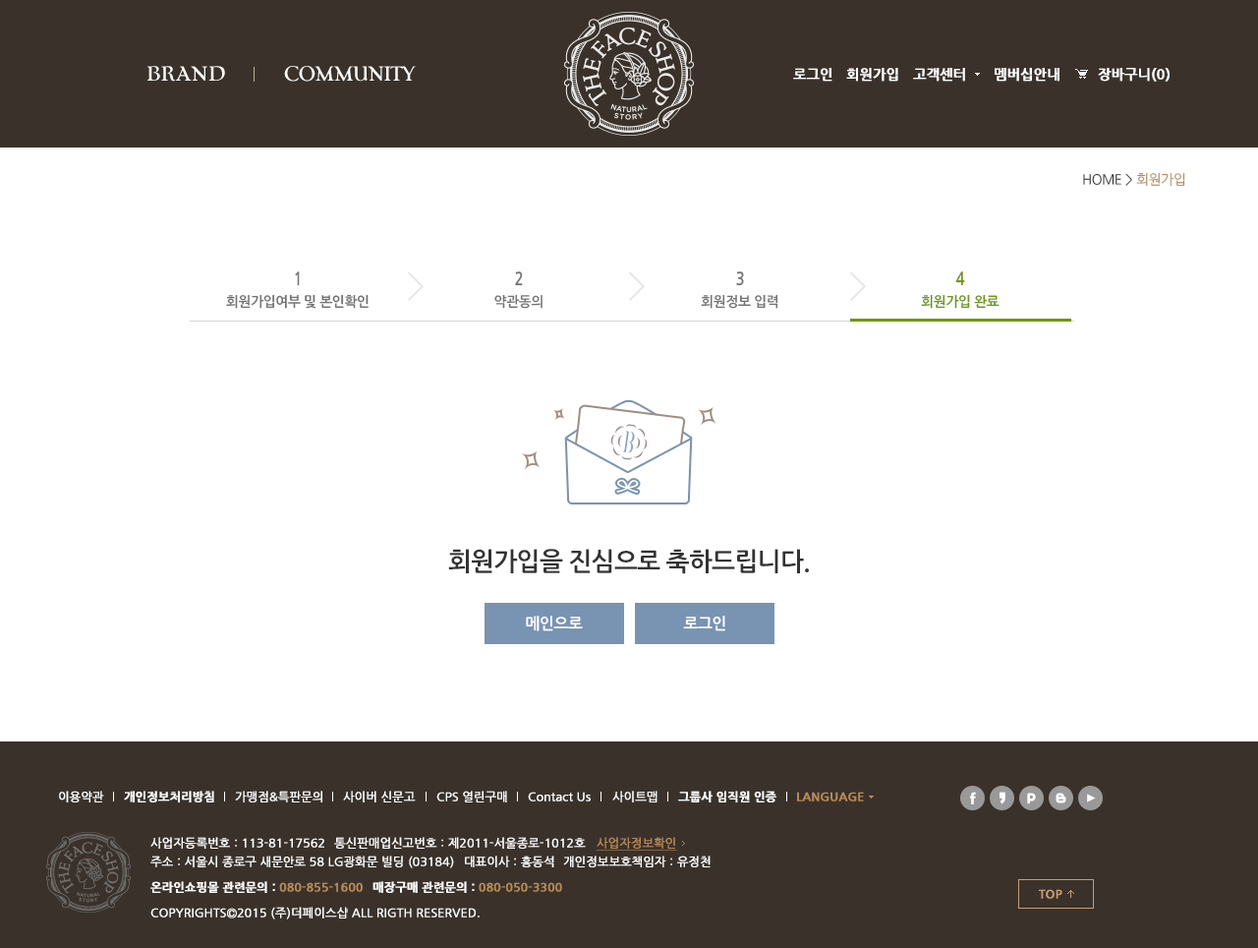
<style>
.page{position:relative;width:1258px;height:948px;background:#ffffff}
.page>*{position:absolute;margin:0}
.t1{font:13.8px "NanumGothicBold";color:#ffffff;font-weight:bold}
.t2{font:13.8px "NanumGothic";letter-spacing:-0.03em;color:#333333}
.t3{font:13.8px "NanumGothic";letter-spacing:-0.03em;color:#b68957}
.t4{font:17.7px "NanumGothicBold";letter-spacing:-0.03em;color:#737373;scale:0.85 1}
.t5{font:17.7px "NanumGothicBold";letter-spacing:-0.03em;color:#6d9811;scale:0.85 1}
.t6{font:13.8px "NanumGothicBold";letter-spacing:-0.03em;color:#737373}
.t7{font:13.8px "NanumGothicBold";letter-spacing:-0.03em;color:#6d9811}
.t8{font:25.6px "NanumGothicBold";letter-spacing:-0.03em;color:#333333}
.t9{font:15.7px "NanumGothicBold";letter-spacing:-0.03em;color:#ffffff}
.t10{font:11.8px "NanumGothic";color:#ffffff;font-weight:bold}
.t11{font:11.8px "NanumGothicBold";color:#ffffff;font-weight:bold}
.t12{font:11.8px "NanumGothicBold";color:#b68957;font-weight:bold}
.t13{font:11.8px "NanumGothic";color:#b68957;font-weight:bold;text-decoration:underline}
</style>
<div class="page">
<p class="t1" style="left:793px;top:68px;width:40px;height:14px">로그인</p>
<p class="t1" style="left:846px;top:68px;width:53px;height:14px">회원가입</p>
<p class="t1" style="left:913px;top:68px;width:52px;height:14px">고객센터</p>
<p class="t1" style="left:995px;top:68px;width:65px;height:14px">멤버십안내</p>
<p class="t1" style="left:1098px;top:68px;width:72px;height:14px">장바구니(0)</p>
<p class="t2" style="left:1083px;top:172px;width:103px;height:15px">HOME &gt; <span class="t3">회원가입</span></p>
<p class="t4" style="left:295px;top:271px;width:5px;height:15px">1</p>
<p class="t4" style="left:515px;top:271px;width:8px;height:15px">2</p>
<p class="t4" style="left:736px;top:271px;width:8px;height:15px">3</p>
<p class="t5" style="left:956px;top:271px;width:9px;height:15px">4</p>
<p class="t6" style="left:226px;top:294px;width:143px;height:15px">회원가입여부 및 본인확인</p>
<p class="t6" style="left:494px;top:294px;width:49px;height:15px">약관동의</p>
<p class="t6" style="left:701px;top:294px;width:78px;height:15px">회원정보 입력</p>
<p class="t7" style="left:921px;top:294px;width:79px;height:15px">회원가입 완료</p>
<p class="t8" style="left:448px;top:549px;width:361px;height:25px">회원가입을 진심으로 축하드립니다.</p>
<p class="t9" style="left:526px;top:615px;width:57px;height:16px">메인으로</p>
<p class="t9" style="left:683px;top:615px;width:42px;height:16px">로그인</p>
<p class="t10" style="left:59px;top:790px;width:45px;height:12px">이용약관</p>
<p class="t11" style="left:124px;top:790px;width:90px;height:12px">개인정보처리방침</p>
<p class="t10" style="left:235px;top:790px;width:87px;height:12px">가맹점&amp;특판문의</p>
<p class="t10" style="left:343px;top:790px;width:73px;height:12px">사이버 신문고</p>
<p class="t10" style="left:436px;top:790px;width:71px;height:12px">CPS 열린구매</p>
<p class="t10" style="left:528px;top:791px;width:63px;height:10px">Contact Us</p>
<p class="t10" style="left:612px;top:790px;width:46px;height:12px">사이트맵</p>
<p class="t11" style="left:678px;top:790px;width:99px;height:12px">그룹사 임직원 인증</p>
<p class="t12" style="left:797px;top:791px;width:67px;height:10px">LANGUAGE</p>
<p class="t10" style="left:150px;top:837px;width:174px;height:11px">사업자등록번호 : 113-81-17562</p>
<p class="t10" style="left:334px;top:837px;width:252px;height:11px">통신판매업신고번호 : 제2011-서울종로-1012호</p>
<p class="t13" style="left:597px;top:837px;width:80px;height:13px">사업자정보확인</p>
<p class="t10" style="left:150px;top:855px;width:304px;height:13px">주소 : 서울시 종로구 새문안로 58 LG광화문 빌딩 (03184)</p>
<p class="t10" style="left:465px;top:855px;width:89px;height:12px">대표이사 : 홍동석</p>
<p class="t10" style="left:563px;top:855px;width:148px;height:12px">개인정보보호책임자 : 유정천</p>
<p class="t11" style="left:150px;top:881px;width:213px;height:12px">온라인쇼핑몰 관련문의 : <span class="t12">080-855-1600</span></p>
<p class="t12" style="left:373px;top:881px;width:189px;height:12px"><span class="t11">매장구매 관련문의 : </span>080-050-3300</p>
<p class="t10" style="left:150px;top:906px;width:330px;height:13px">COPYRIGHTS©2015 (주)더페이스샵 ALL RIGTH RESERVED.</p>
</div>
